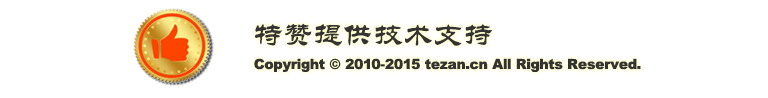
<style>
.page{position:relative;width:768px;height:98px;background:#ffffff}
.page>*{position:absolute;margin:0}
.t1{font:30px "STLiti";color:#333333}
.t2{font:14px "Arial-Black";color:#333333}
</style>
<div class="page">
<p class="t1" style="left:255px;top:23px;width:237px;height:23px">特赞提供技术支持</p>
<p class="t2" style="left:254px;top:58px;width:387px;height:14px">Copyright © 2010-2015 tezan.cn All Rights Reserved.</p>
</div>
